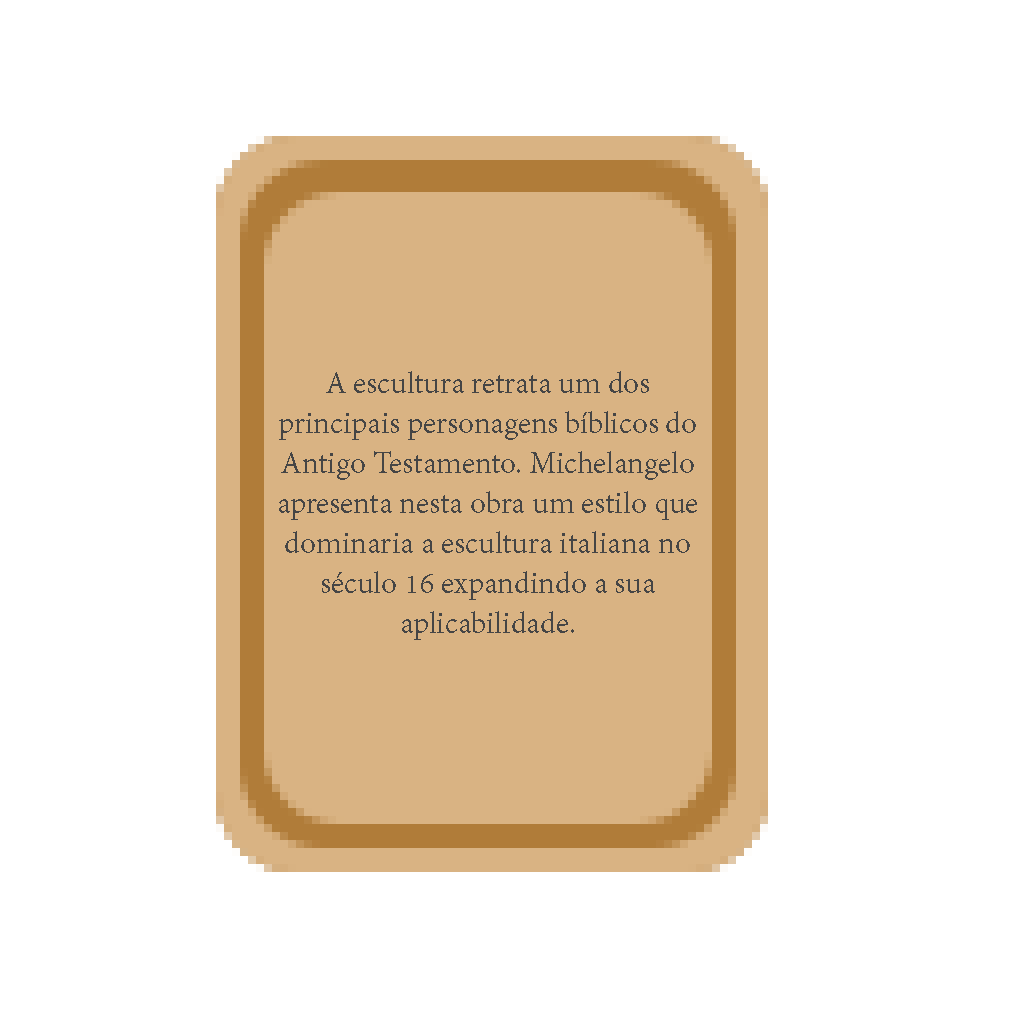
<style>
.page{position:relative;width:1024px;height:1024px;background:#ffffff}
.page>*{position:absolute;margin:0}
.t1{font:33.3px "AdobeDevanagari-Regular";color:#454545}
</style>
<div class="page">
<p class="t1" style="left:279px;top:371px;width:418px;height:269px;text-align:center">A escultura retrata um dos principais personagens bíblicos do Antigo Testamento. Michelangelo apresenta nesta obra um estilo que dominaria a escultura italiana no século 16 expandindo a sua aplicabilidade.</p>
</div>
